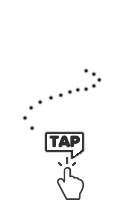
<style>
.page{position:relative;width:130px;height:200px;background:#ffffff}
.page>*{position:absolute;margin:0}
.t1{font:16px "Debussy";color:#2e2e2e}
</style>
<div class="page">
<p class="t1" style="left:49px;top:135px;width:32px;height:13px">TAP</p>
</div>
